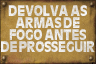
<style>
.page{position:relative;width:96px;height:64px}
.page>*{position:absolute;margin:0}
.t1{font:15.4px/12px "CartesDisplaySSK";letter-spacing:-0.01em;color:#f4f4f4;scale:0.88 1}
</style>
<div class="page">
<p class="t1" style="left:1px;top:5px;width:94px;height:47px;text-align:center">DEVOLVA AS<br>ARMAS DE<br>FOGO ANTES<br>DE PROSSEGUIR</p>
</div>
